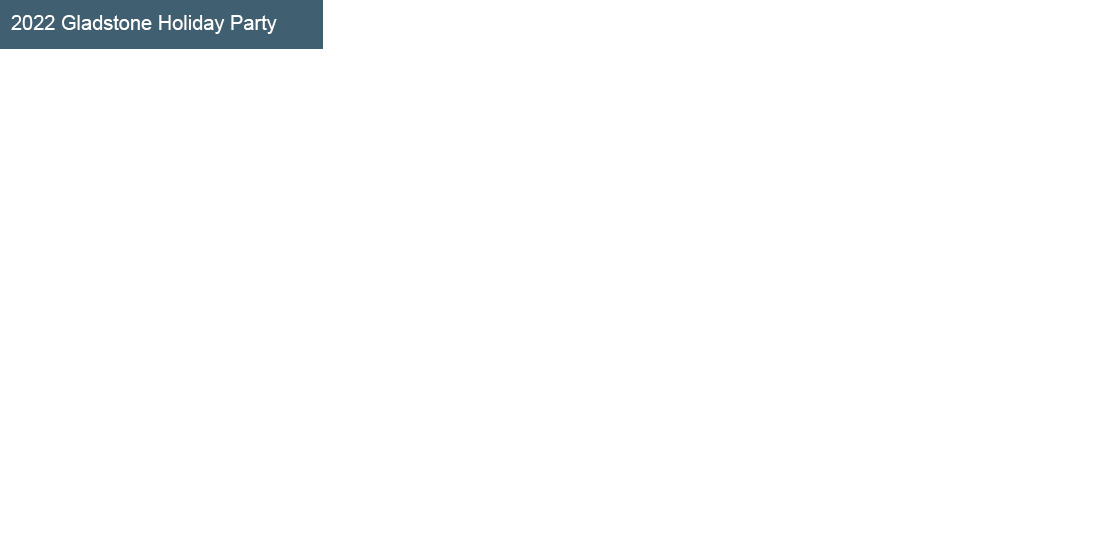
<style>
.page{position:relative;width:1110px;height:555px;background:#ffffff}
.page>*{position:absolute;margin:0}
.t1{font:20px "ArialMT";color:#ffffff}
</style>
<div class="page">
<p class="t1" style="left:11px;top:15px;width:266px;height:19px">2022 Gladstone Holiday Party</p>
</div>
